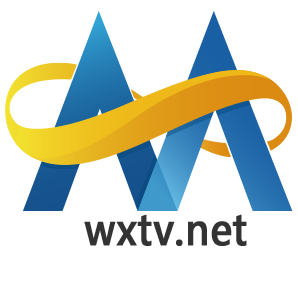
<style>
.page{position:relative;width:298px;height:298px;background:#ffffff}
.page>*{position:absolute;margin:0}
.t1{font:42.9px "MicrosoftJhengHeiUIBold";color:#333333;font-weight:bold;scale:0.88 1}
</style>
<div class="page">
<p class="t1" style="left:84px;top:214px;width:163px;height:32px">wxtv.net</p>
</div>
